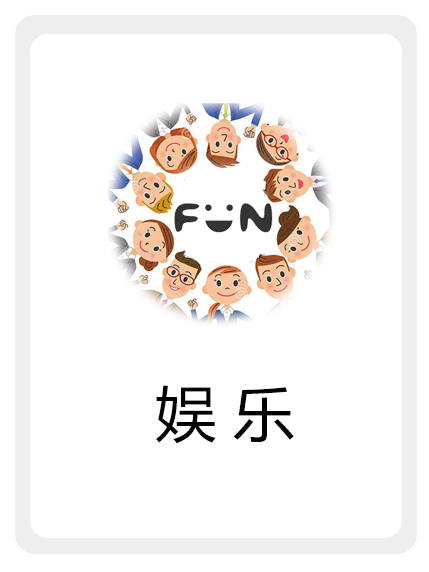
<style>
.page{position:relative;width:429px;height:572px;background:#ffffff}
.page>*{position:absolute;margin:0}
.t1{font:60px "MicrosoftYaHei";letter-spacing:0.26em;color:#030303;scale:1.03 1}
</style>
<div class="page">
<p class="t1" style="left:156px;top:385px;width:138px;height:59px">娱乐</p>
</div>
